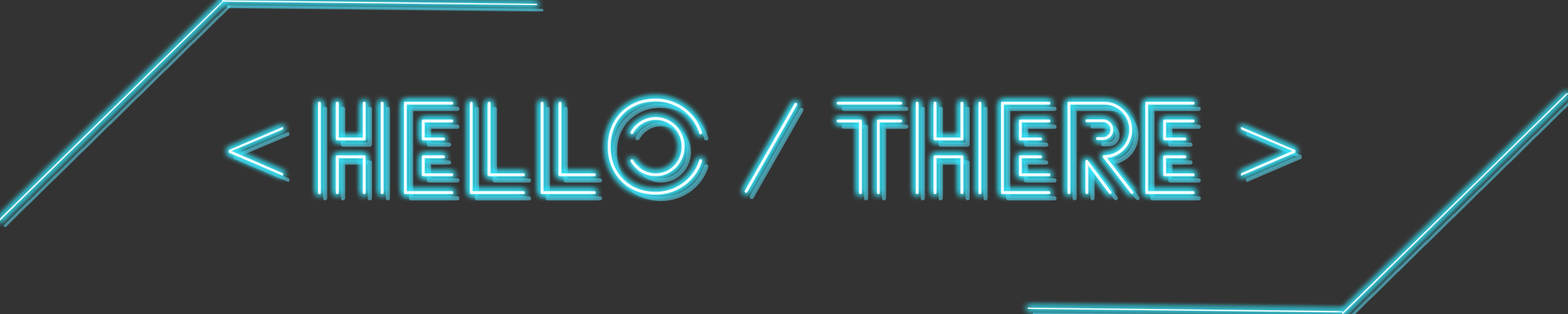
<style>
.page{position:relative;width:1568px;height:314px;background:#333333}
.page>*{position:absolute;margin:0}
.t1{font:313.6px "KunstlerScript";color:#ffffff}
.t2{font:125.4px "Lovelo-LineLight";color:#ffffff}
.t3{font:125.4px "KunstlerScript";color:#ffffff}
</style>
<div class="page">
<p class="t1" style="left:222px;top:0px;width:316px;height:6px;rotate:45deg">/</p>
<p class="t2" style="left:228px;top:98px;width:1068px;height:96px"><span class="t3">&lt; </span>HELLO / THERE <span class="t3">&gt;</span></p>
<p class="t1" style="left:1342px;top:93px;width:227px;height:221px">/</p>
<p class="t1" style="left:1027px;top:307px;width:316px;height:5px;rotate:-135deg">/</p>
</div>
